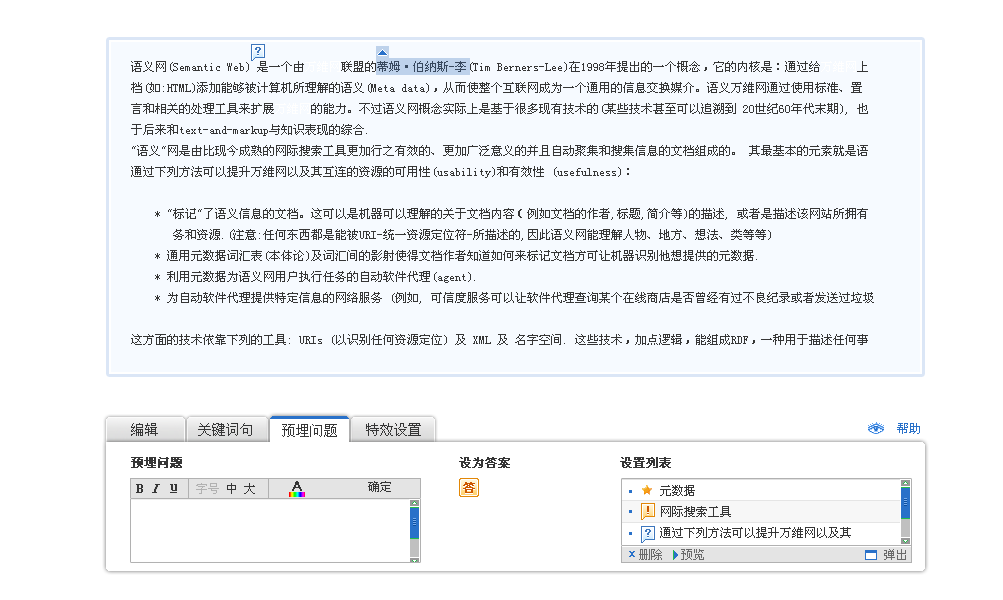
<style>
.page{position:relative;width:1003px;height:600px;background:#ffffff}
.page>*{position:absolute;margin:0}
.t1{font:12px/21px "SimSun";color:#363636}
.t2{font:12px/21px "SimSun";color:#ffffff}
.t3{font:14px "SimSun";color:#363636}
.t4{font:12px "SimSun";color:#2971c9}
.t5{font:12px "SimSun";color:#363636;font-weight:bold}
.t6{font:12px "SimSun";color:#363636}
.t7{font:12px "SimSun";color:#b1b1b1}
.t8{font:12px "SimSun";color:#696969}
</style>
<div class="page">
<p class="t1" style="left:131px;top:61px;width:743px;height:284px">语义网(Semantic Web) 是一个由<span class="t2">万维网</span>联盟的蒂姆·伯纳斯-李(Tim Berners-Lee)在1998年提出的一个概念，它的内核是：通过给<span class="t2">万维网</span>上<br>档(如:HTML)添加能够被计算机所理解的语义(Meta data)，从而使整个互联网成为一个通用的信息交换媒介。语义万维网通过使用标准、置<br>言和相关的处理工具来扩展<span class="t2">万维网</span>的能力。不过语义网概念实际上是基于很多现有技术的(某些技术甚至可以追溯到 20世纪60年代末期), 也<br>于后来和text-and-markup与知识表现的综合.<br>"语义"网是由比现今成熟的网际搜索工具更加行之有效的、更加广泛意义的并且自动聚集和搜集信息的文档组成的。 其最基本的元素就是语<br>通过下列方法可以提升万维网以及其互连的资源的可用性(usability)和有效性 (usefulness)：<br><br>    * "标记"了语义信息的文档。这可以是机器可以理解的关于文档内容（例如文档的作者,标题,简介等)的描述, 或者是描述该网站所拥有<br>       务和资源.(注意:任何东西都是能被URI-统一资源定位符-所描述的,因此语义网能理解人物、地方、想法、类等等)<br>    * 通用元数据词汇表(本体论)及词汇间的影射使得文档作者知道如何来标记文档方可让机器识别他想提供的元数据.<br>    * 利用元数据为语义网用户执行任务的自动软件代理(agent).<br>    * 为自动软件代理提供特定信息的网络服务 (例如, 可信度服务可以让软件代理查询某个在线商店是否曾经有过不良纪录或者发送过垃圾<br><br>这方面的技术依靠下列的工具: URIs (以识别任何资源定位) 及 XML 及 名字空间. 这些技术，加点逻辑，能组成RDF，一种用于描述任何事</p>
<p class="t3" style="left:131px;top:423px;width:27px;height:13px">编辑</p>
<p class="t3" style="left:198px;top:423px;width:54px;height:13px">关键词句</p>
<p class="t3" style="left:282px;top:424px;width:55px;height:13px">预埋问题</p>
<p class="t3" style="left:366px;top:423px;width:55px;height:13px">特效设置</p>
<p class="t4" style="left:897px;top:423px;width:23px;height:11px">帮助</p>
<p class="t5" style="left:131px;top:457px;width:51px;height:11px">预埋问题</p>
<p class="t5" style="left:459px;top:457px;width:51px;height:11px">设为答案</p>
<p class="t5" style="left:620px;top:457px;width:51px;height:11px">设置列表</p>
<p class="t6" style="left:196px;top:483px;width:59px;height:11px"><span class="t7">字号 </span>中 大</p>
<p class="t6" style="left:368px;top:481px;width:23px;height:11px">确定</p>
<p class="t8" style="left:639px;top:549px;width:65px;height:11px">删除   预览</p>
<p class="t8" style="left:884px;top:549px;width:22px;height:11px">弹出</p>
</div>
